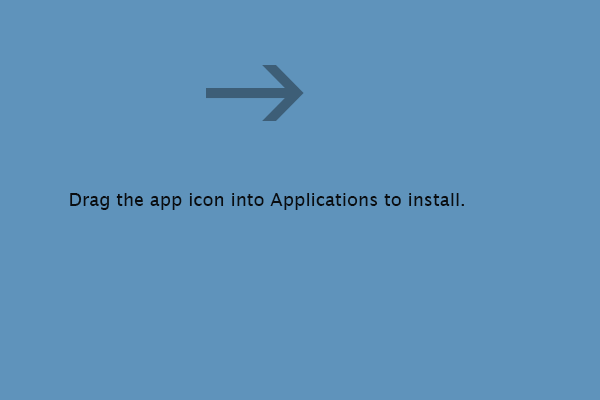
<style>
.page{position:relative;width:600px;height:400px;background:#5f93bb}
.page>*{position:absolute;margin:0}
.t1{font:18px "LucidaGrande";color:#0a0d10}
</style>
<div class="page">
<p class="t1" style="left:70px;top:193px;width:394px;height:17px">Drag the app icon into Applications to install.</p>
</div>
